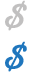
<style>
.page{position:relative;width:30px;height:74px;background:#ffffff}
.page>*{position:absolute;margin:0}
.t1{font:32px "Lombriz";color:#1f76bd}
</style>
<div class="page">
<p class="t1" style="left:5px;top:41px;width:22px;height:31px">$</p>
</div>
